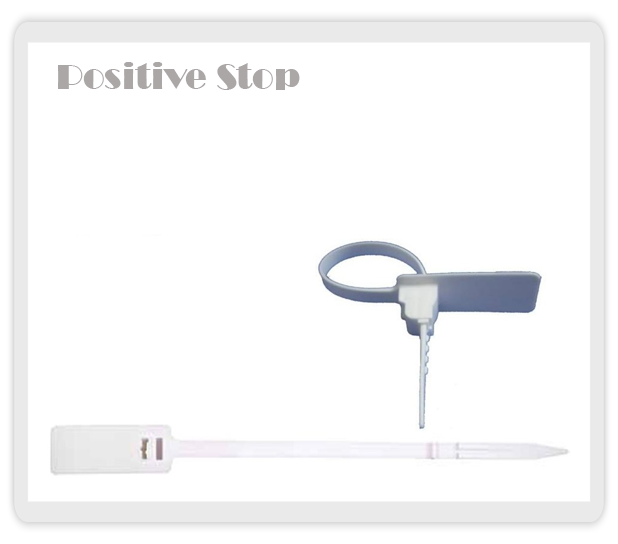
<style>
.page{position:relative;width:618px;height:544px;background:#ffffff}
.page>*{position:absolute;margin:0}
.t1{font:36px "Broadway";color:#aca7a7}
</style>
<div class="page">
<p class="t1" style="left:58px;top:62px;width:242px;height:28px">Positive Stop</p>
</div>
